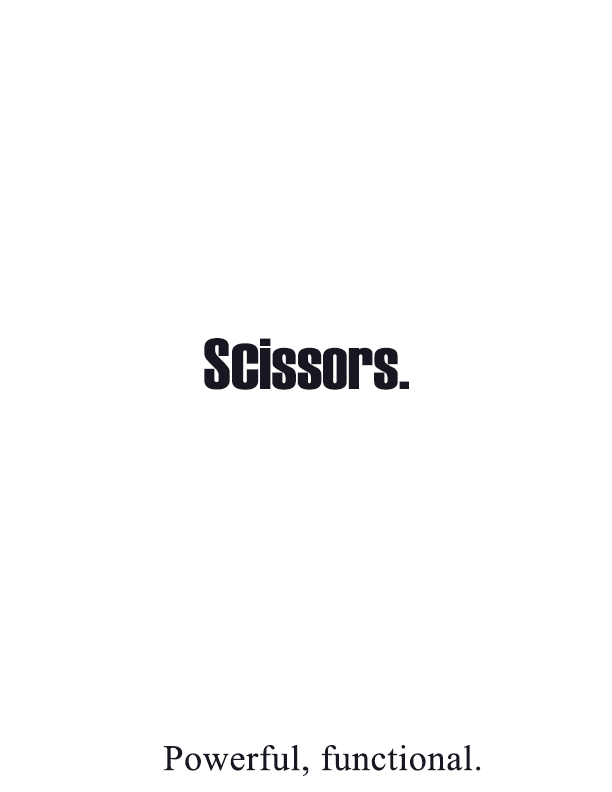
<style>
.page{position:relative;width:612px;height:792px;background:#ffffff}
.page>*{position:absolute;margin:0}
.t1{font:72px "Haettenschweiler";color:#181621}
.t2{font:80px "Haettenschweiler";color:#181621}
.t3{font:36px "TimesNewRomanPSMT";letter-spacing:0.02em;color:#181621}
</style>
<div class="page">
<p class="t1" style="left:204px;top:338px;width:205px;height:52px">S<span class="t2">c</span>issors.</p>
<p class="t3" style="left:163px;top:745px;width:318px;height:32px">Powerful, functional.</p>
</div>
